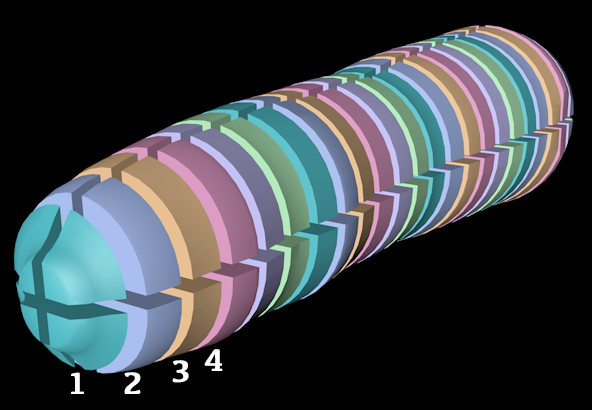
<style>
.page{position:relative;width:592px;height:410px;background:#000000}
.page>*{position:absolute;margin:0}
.t1{font:32px "Kefa-Bold";color:#fcfcfc}
</style>
<div class="page">
<p class="t1" style="left:204px;top:349px;width:19px;height:22px">4</p>
<p class="t1" style="left:172px;top:360px;width:17px;height:23px">3</p>
<p class="t1" style="left:71px;top:372px;width:13px;height:22px">1</p>
<p class="t1" style="left:124px;top:372px;width:17px;height:22px">2</p>
</div>
